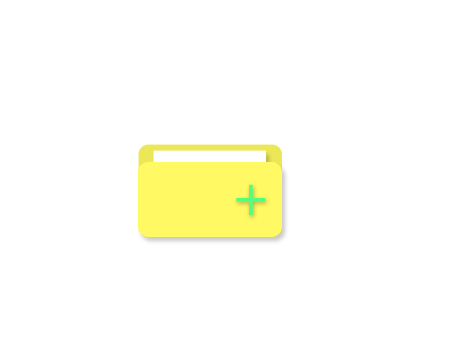
<style>
.page{position:relative;width:454px;height:340px;background:#ffffff}
.page>*{position:absolute;margin:0}
.t1{font:57px "MyriadPro-Regular";color:#54ff7c}
</style>
<div class="page">
<p class="t1" style="left:236px;top:184px;width:30px;height:31px">+</p>
</div>
